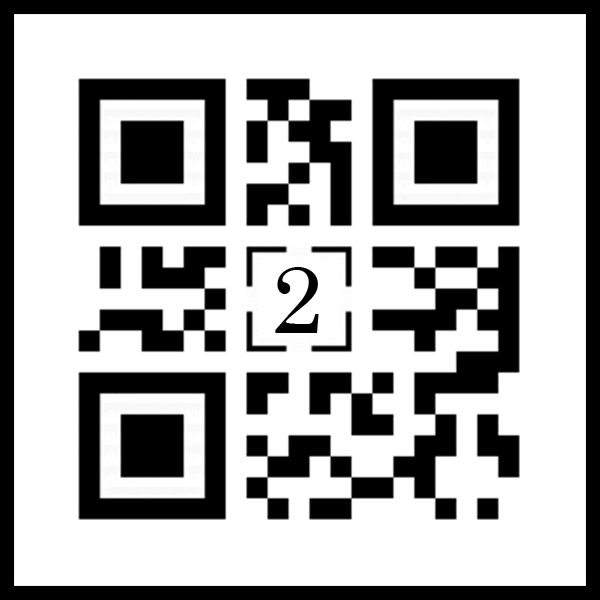
<style>
.page{position:relative;width:600px;height:600px;background:#ffffff}
.page>*{position:absolute;margin:0}
.t1{font:95.2px "Century";color:#000000}
</style>
<div class="page">
<p class="t1" style="left:275px;top:267px;width:44px;height:66px">2</p>
</div>
